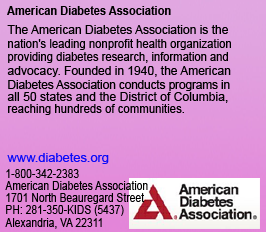
<style>
.page{position:relative;width:266px;height:232px}
.page>*{position:absolute;margin:0}
.t1{font:12px "Arial-BoldMT";color:#000000;scale:0.92 1}
.t2{font:12px "ArialMT";color:#000000}
.t3{font:12px "ArialMT";color:#000000;scale:0.94 1}
.t4{font:12px "ArialMT";color:#000000;scale:0.93 1}
.t5{font:12px "ArialMT";color:#000000;scale:0.97 1}
.t6{font:12px "ArialMT";color:#000000;scale:0.95 1}
.t7{font:12px "ArialMT";color:#0b0bf9;scale:1.07 1}
.t8{font:12px "ArialMT";color:#000000;scale:0.86 1}
</style>
<div class="page">
<p class="t1" style="left:7px;top:6px;width:164px;height:9px">American Diabetes Association</p>
<p class="t2" style="left:7px;top:25px;width:221px;height:9px">The American Diabetes Association is the</p>
<p class="t3" style="left:8px;top:39px;width:223px;height:11px">nation's leading nonprofit health organization</p>
<p class="t4" style="left:8px;top:52px;width:220px;height:11px">providing diabetes research, information and</p>
<p class="t2" style="left:7px;top:66px;width:224px;height:11px">advocacy. Founded in 1940, the American</p>
<p class="t5" style="left:8px;top:80px;width:222px;height:11px">Diabetes Association conducts programs in</p>
<p class="t2" style="left:7px;top:92px;width:221px;height:11px">all 50 states and the District of Columbia,</p>
<p class="t6" style="left:8px;top:104px;width:176px;height:11px">reaching hundreds of communities.</p>
<p class="t7" style="left:7px;top:153px;width:102px;height:11px">www.diabetes.org</p>
<p class="t8" style="left:6px;top:169px;width:73px;height:9px">1-800-342-2383</p>
<p class="t8" style="left:5px;top:181px;width:143px;height:9px">American Diabetes Association</p>
<p class="t8" style="left:6px;top:193px;width:138px;height:11px">1701 North Beauregard Street</p>
<p class="t8" style="left:6px;top:205px;width:118px;height:11px">PH: 281-350-KIDS (5437)</p>
<p class="t8" style="left:5px;top:218px;width:97px;height:11px">Alexandria, VA 22311</p>
</div>
